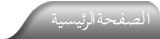
<style>
.page{position:relative;width:160px;height:39px}
.page>*{position:absolute;margin:0}
.t1{font:26px "TraditionalArabic";letter-spacing:-0.08em;color:#fbfcfc}
</style>
<div class="page">
<p class="t1" style="left:51px;top:10px;width:99px;height:20px">ا   لصفحة   الرئيسية</p>
</div>
